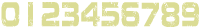
<style>
.page{position:relative;width:200px;height:28px;background:#ffffff}
.page>*{position:absolute;margin:0}
.t1{font:34.4px "JacintoSans";color:#dbdc95;scale:0.61 1}
</style>
<div class="page">
<p class="t1" style="left:1px;top:2px;width:19px;height:25px">0</p>
<p class="t1" style="left:28px;top:2px;width:5px;height:25px">1</p>
<p class="t1" style="left:41px;top:2px;width:19px;height:25px">2</p>
<p class="t1" style="left:62px;top:2px;width:17px;height:25px">3</p>
<p class="t1" style="left:81px;top:2px;width:19px;height:25px">4</p>
<p class="t1" style="left:101px;top:1px;width:19px;height:26px">5</p>
<p class="t1" style="left:121px;top:2px;width:19px;height:25px">6</p>
<p class="t1" style="left:141px;top:2px;width:18px;height:25px">7</p>
<p class="t1" style="left:161px;top:2px;width:19px;height:25px">8</p>
<p class="t1" style="left:182px;top:2px;width:17px;height:25px">9</p>
</div>
